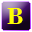
<style>
.page{position:relative;width:32px;height:32px}
.page>*{position:absolute;margin:0}
.t1{font:24px "BodoniBT-Bold";color:#ffff00}
</style>
<div class="page">
<p class="t1" style="left:7px;top:8px;width:16px;height:16px">B</p>
</div>
